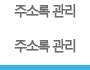
<style>
.page{position:relative;width:90px;height:70px;background:#ffffff}
.page>*{position:absolute;margin:0}
.t1{font:14px "MalgunGothicRegular";letter-spacing:-0.15em;color:#6e6e6e;font-weight:bold;scale:0.95 1}
</style>
<div class="page">
<p class="t1" style="left:14px;top:4px;width:62px;height:14px">주소록 관리</p>
<p class="t1" style="left:14px;top:39px;width:62px;height:14px">주소록 관리</p>
</div>
